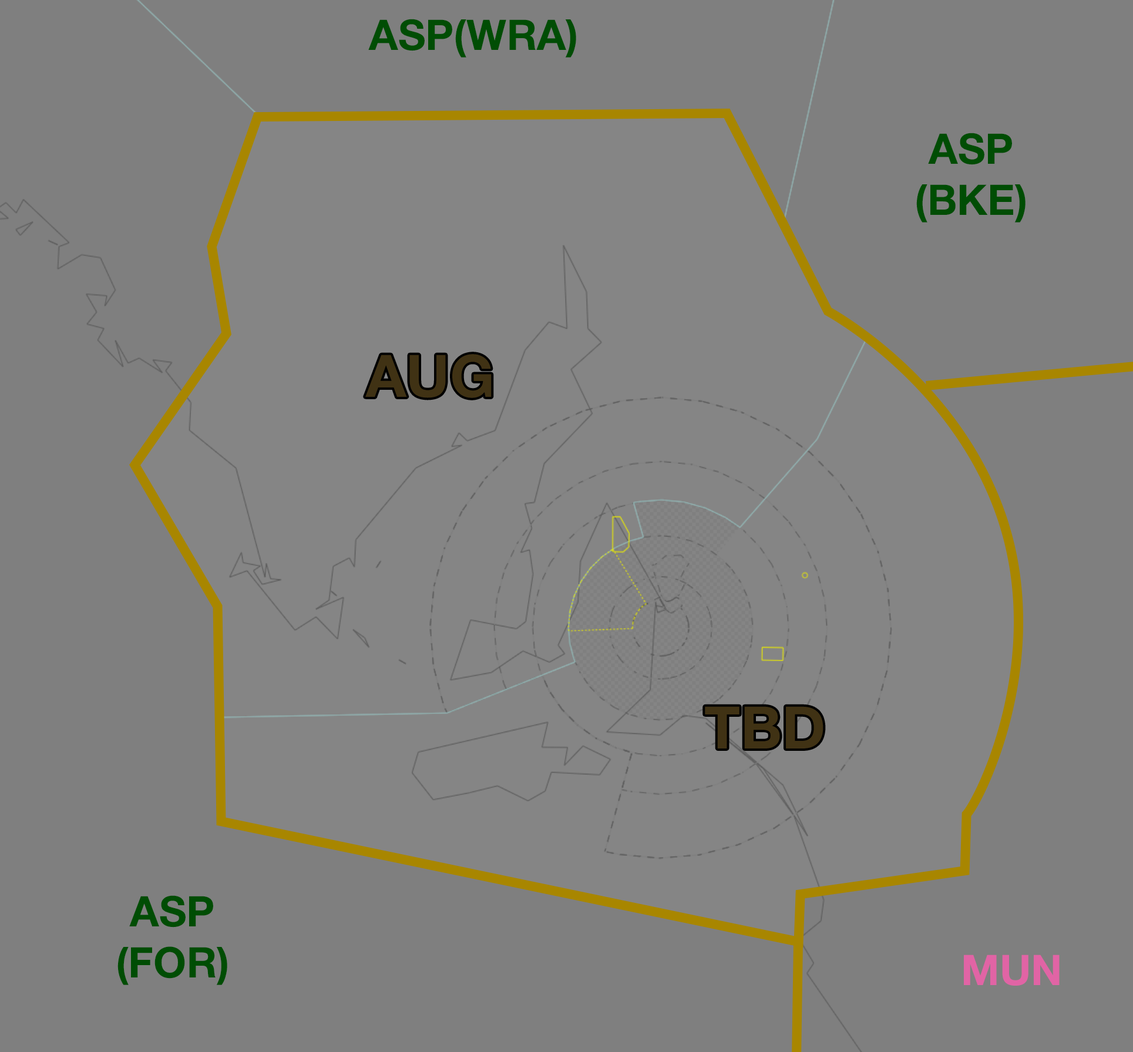
<style>
.page{position:relative;width:1133px;height:1052px;background:#7f7f7f}
.page>*{position:absolute;margin:0}
.t1{font:42.3px "HelveticaNeue-Bold";color:#004d04}
.t2{font:58.7px "HelveticaNeue-Bold";color:#403214}
.t3{font:42.3px "HelveticaNeue-Bold";color:#e164a5}
</style>
<div class="page">
<p class="t1" style="left:368px;top:19px;width:208px;height:39px">ASP(WRA)</p>
<p class="t1" style="left:916px;top:133px;width:109px;height:90px;text-align:center">ASP<br>(BKE)</p>
<p class="t2" style="left:365px;top:354px;width:127px;height:44px">AUG</p>
<p class="t2" style="left:705px;top:707px;width:118px;height:42px">TBD</p>
<p class="t1" style="left:117px;top:896px;width:110px;height:90px;text-align:center">ASP<br>(FOR)</p>
<p class="t3" style="left:964px;top:955px;width:96px;height:31px">MUN</p>
</div>
